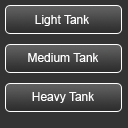
<style>
.page{position:relative;width:128px;height:128px;background:#333333}
.page>*{position:absolute;margin:0}
.t1{font:12px "ArialMT";color:#ffffff}
</style>
<div class="page">
<p class="t1" style="left:35px;top:15px;width:54px;height:11px">Light Tank</p>
<p class="t1" style="left:28px;top:53px;width:71px;height:9px">Medium Tank</p>
<p class="t1" style="left:32px;top:92px;width:62px;height:11px">Heavy Tank</p>
</div>
